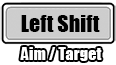
<style>
.page{position:relative;width:116px;height:65px;background:#ffffff}
.page>*{position:absolute;margin:0}
.t1{font:21.9px "Impact";color:#000000}
.t2{font:16.4px "Impact";color:#ffffff}
</style>
<div class="page">
<p class="t1" style="left:21px;top:15px;width:79px;height:17px">Left Shift</p>
<p class="t2" style="left:20px;top:47px;width:82px;height:14px">Aim / Target</p>
</div>
